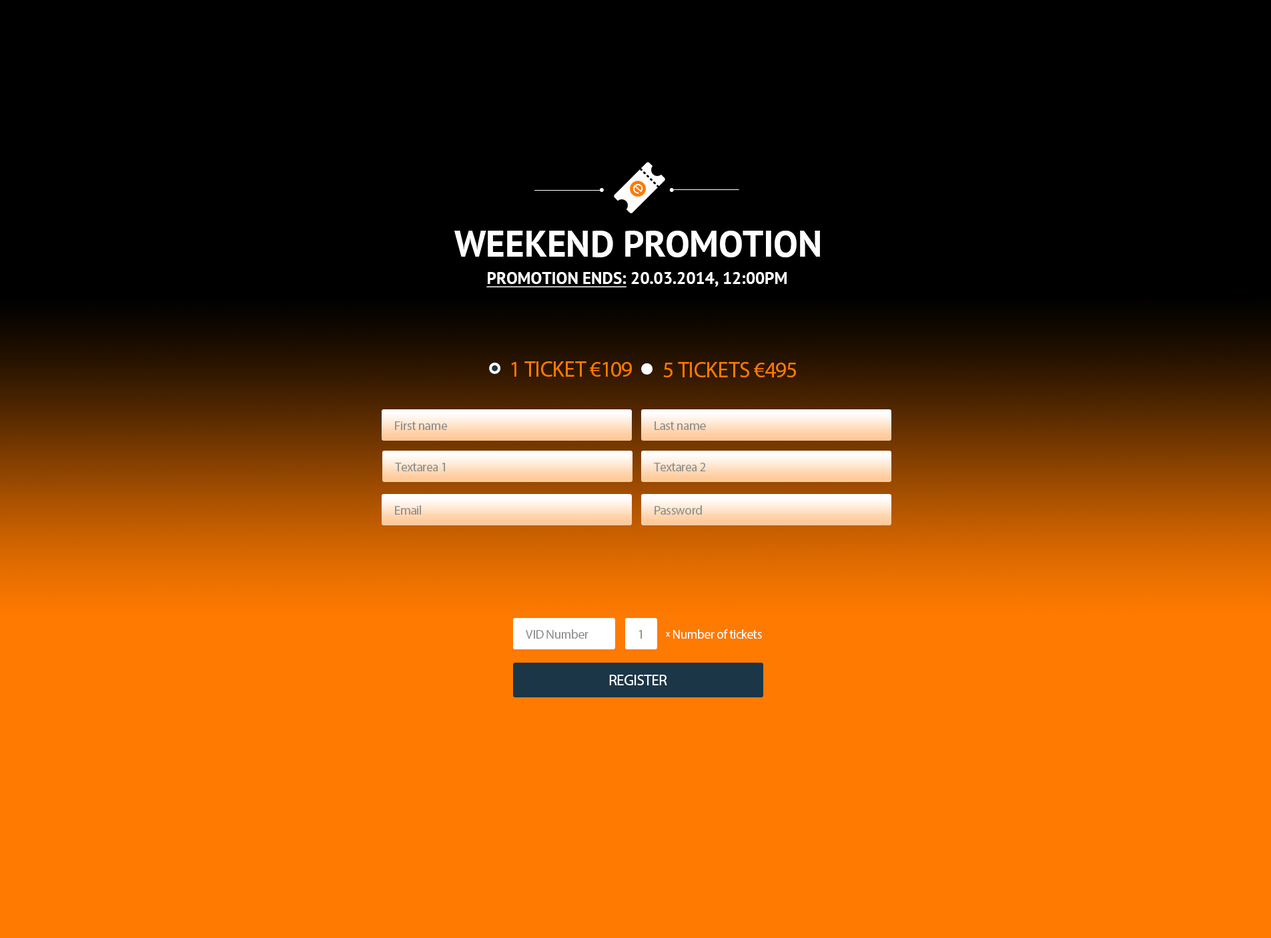
<style>
.page{position:relative;width:1271px;height:938px;background:#ff7a00}
.page>*{position:absolute;margin:0}
.t1{font:36.7px "PTSans-Bold";color:#ffffff;text-transform:uppercase}
.t2{font:16.7px "PTSans-Bold";color:#ffffff}
.t3{font:16.7px "PTSans-Bold";color:#ffffff;text-decoration:underline}
.t4{font:22px "MyriadPro-Regular";letter-spacing:-0.01em;color:#ff7a00;text-transform:uppercase}
.t5{font:12.7px "MyriadPro-Regular";letter-spacing:-0.02em;color:#8c8c8c}
.t6{font:12.7px "MyriadPro-Regular";letter-spacing:-0.02em;color:#ffffff}
.t7{font:8.7px "MyriadPro-Regular";letter-spacing:-0.02em;color:#ffffff}
.t8{font:15.3px "MyriadPro-Regular";letter-spacing:-0.02em;color:#ffffff}
</style>
<div class="page">
<p class="t1" style="left:454px;top:231px;width:366px;height:26px">WEEKEND PROMOTION</p>
<p class="t2" style="left:486px;top:272px;width:300px;height:15px"><span class="t3">PROMOTION ENDS:</span> 20.03.2014, 12:00PM</p>
<p class="t4" style="left:511px;top:362px;width:121px;height:15px">1 ticket €109</p>
<p class="t4" style="left:663px;top:362px;width:133px;height:16px">5 tickets €495</p>
<p class="t5" style="left:395px;top:422px;width:52px;height:8px">First name</p>
<p class="t5" style="left:654px;top:422px;width:52px;height:8px">Last name</p>
<p class="t5" style="left:395px;top:463px;width:50px;height:9px">Textarea 1</p>
<p class="t5" style="left:654px;top:463px;width:52px;height:9px">Textarea 2</p>
<p class="t5" style="left:395px;top:506px;width:26px;height:9px">Email</p>
<p class="t5" style="left:654px;top:506px;width:48px;height:9px">Password</p>
<p class="t5" style="left:526px;top:630px;width:62px;height:9px">VID Number</p>
<p class="t6" style="left:666px;top:630px;width:96px;height:9px"><span class="t7">x</span> Number of tickets</p>
<p class="t5" style="left:638px;top:630px;width:4px;height:9px">1</p>
<p class="t8" style="left:609px;top:675px;width:58px;height:11px">REGISTER</p>
</div>
